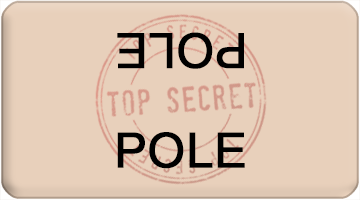
<style>
.page{position:relative;width:360px;height:200px;background:#e8d0bb}
.page>*{position:absolute;margin:0}
.t1{font:48px "ArialMT";color:#000000;font-weight:bold}
</style>
<div class="page">
<p class="t1" style="left:117px;top:32px;width:127px;height:37px;rotate:180deg">POLE</p>
<p class="t1" style="left:117px;top:132px;width:128px;height:37px">POLE</p>
</div>
